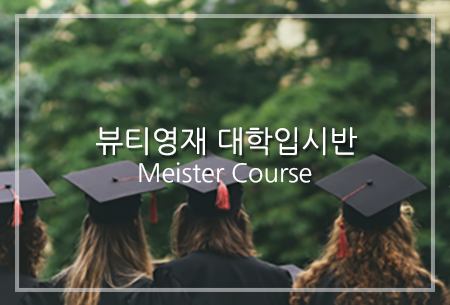
<style>
.page{position:relative;width:450px;height:305px}
.page>*{position:absolute;margin:0}
.t1{font:30px "NanumGothic";color:#ffffff}
.t2{font:25.3px "NanumGothic";color:#ffffff}
</style>
<div class="page">
<p class="t1" style="left:96px;top:127px;width:261px;height:29px">뷰티영재 대학입시반</p>
<p class="t2" style="left:139px;top:162px;width:173px;height:21px">Meister Course</p>
</div>
